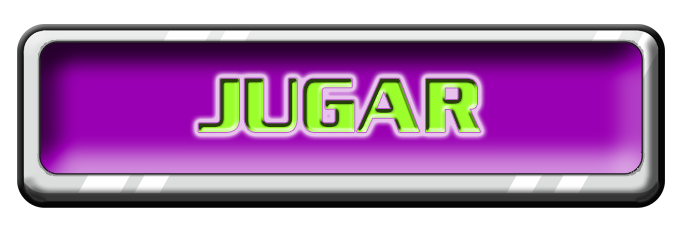
<style>
.page{position:relative;width:680px;height:230px;background:#ffffff}
.page>*{position:absolute;margin:0}
.t1{font:76.2px "EnterSansmanBold"}
</style>
<div class="page">
<p class="t1" style="left:198px;top:78px;width:283px;height:54px">JUGAR</p>
</div>
